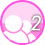
<style>
.page{position:relative;width:45px;height:45px;background:#ffffff}
.page>*{position:absolute;margin:0}
.t1{font:20px "CenturyGothic-Italic";color:#ffffff}
</style>
<div class="page">
<p class="t1" style="left:30px;top:15px;width:11px;height:16px">2</p>
</div>
